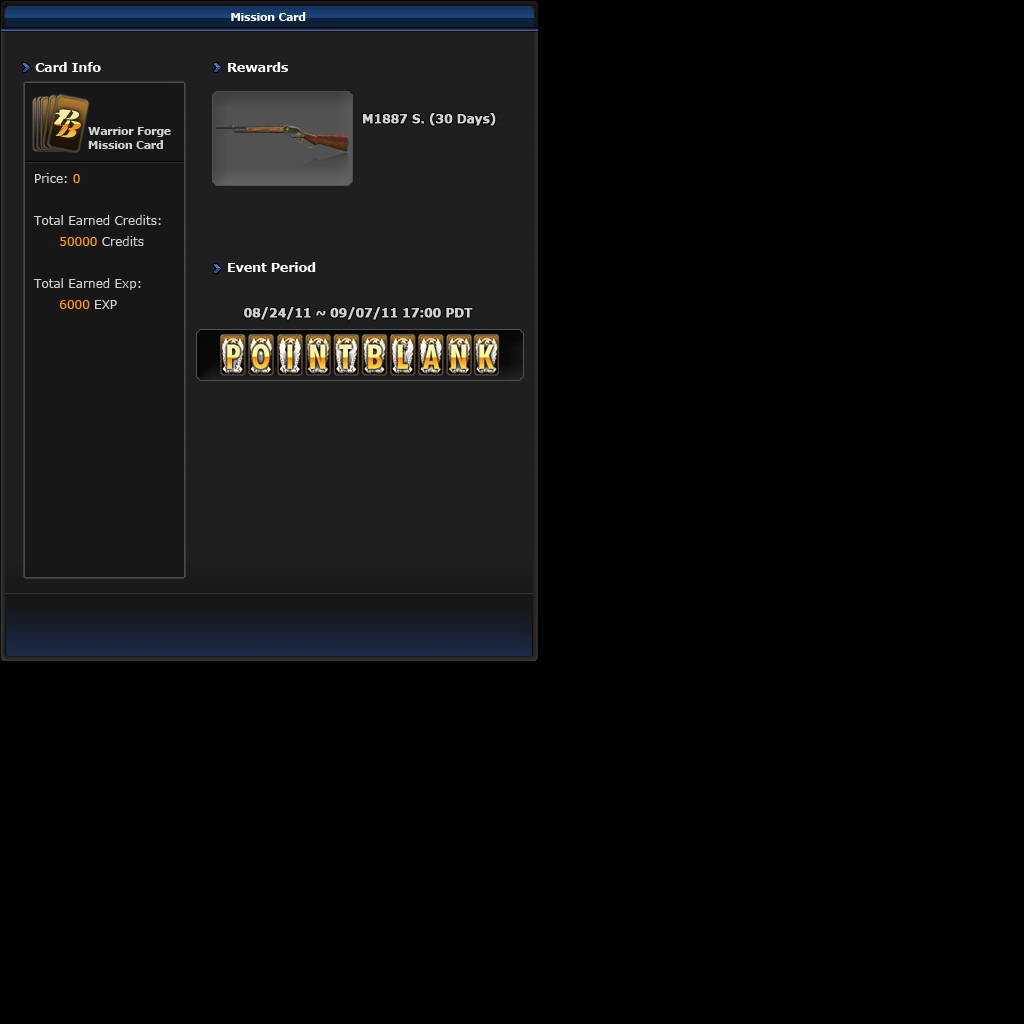
<style>
.page{position:relative;width:1024px;height:1024px;background:#000000}
.page>*{position:absolute;margin:0}
.t1{font:11px "Verdana-Bold";letter-spacing:-0.025em;color:#ffffff}
.t2{font:13px "Verdana-Bold";letter-spacing:-0.025em;color:#ffffff}
.t3{font:12px "Verdana-Bold";letter-spacing:-0.025em;color:#d2d2d2;font-weight:bold}
.t4{font:11px/14px "Verdana-Bold";letter-spacing:-0.025em;color:#d2d2d2}
.t5{font:12px "Verdana";color:#d2d2d2}
.t6{font:12px "Verdana";color:#ff9900}
</style>
<div class="page">
<p class="t1" style="left:231px;top:12px;width:75px;height:9px">Mission Card</p>
<p class="t2" style="left:35px;top:62px;width:66px;height:10px">Card Info</p>
<p class="t2" style="left:228px;top:62px;width:60px;height:10px">Rewards</p>
<p class="t3" style="left:363px;top:113px;width:133px;height:13px">M1887 S. (30 Days)</p>
<p class="t4" style="left:88px;top:127px;width:83px;height:22px">Warrior Forge <br>Mission Card</p>
<p class="t5" style="left:33px;top:173px;width:128px;height:136px">Price: <span class="t6">0<br><br></span>Total Earned Credits: <br><span class="t6">      50000 </span>Credits<br><br>Total Earned Exp:<br>      <span class="t6">6000</span> EXP</p>
<p class="t2" style="left:228px;top:262px;width:88px;height:10px">Event Period</p>
<p class="t3" style="left:244px;top:307px;width:229px;height:13px">08/24/11 ~ 09/07/11 17:00 PDT</p>
</div>
